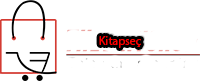
<style>
.page{position:relative;width:200px;height:81px;background:#ffffff}
.page>*{position:absolute;margin:0}
.t1{font:12px "MyriadPro-Regular";color:#ff0000}
</style>
<div class="page">
<p class="t1" style="left:99px;top:36px;width:42px;height:12px">Kitapseç</p>
</div>
